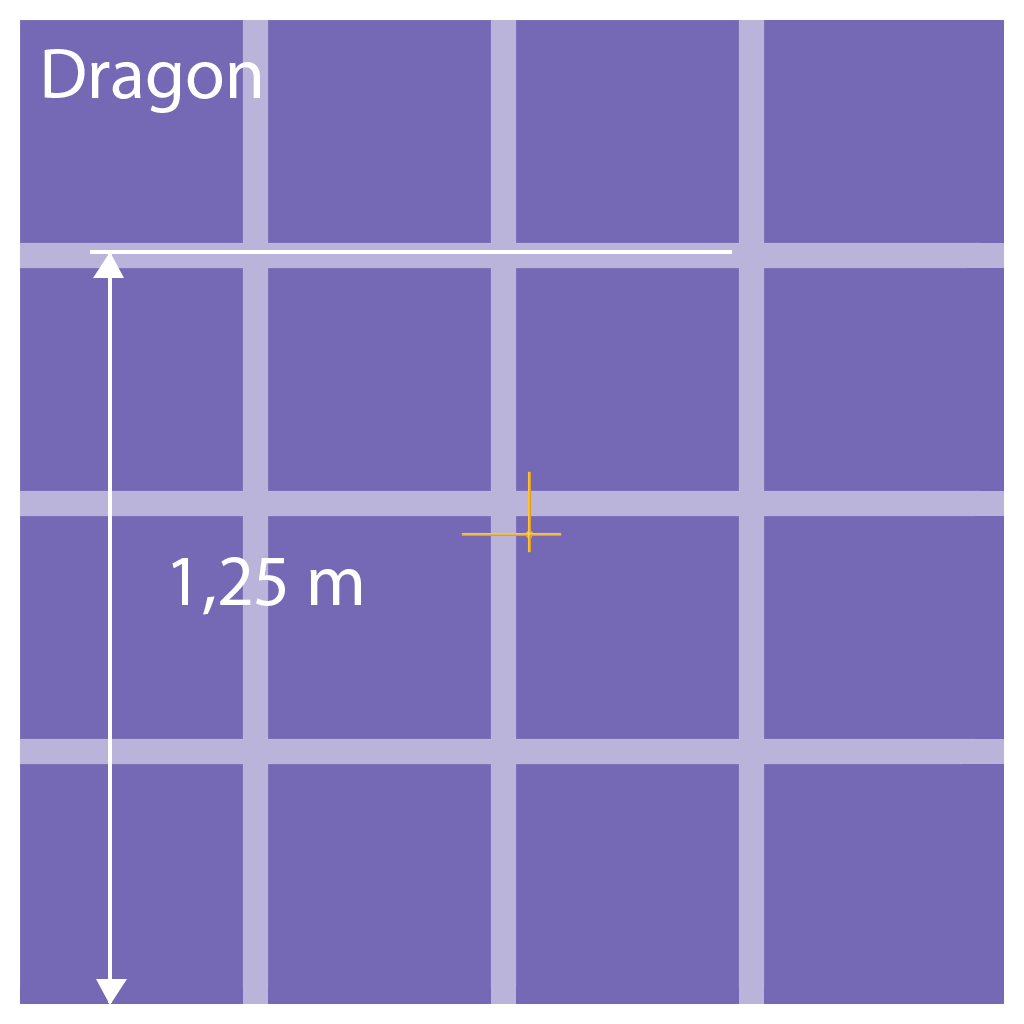
<style>
.page{position:relative;width:1024px;height:1024px;background:#7568b5}
.page>*{position:absolute;margin:0}
.t1{font:72px "MyriadPro-Regular";color:#ffffff}
</style>
<div class="page">
<p class="t1" style="left:44px;top:49px;width:216px;height:64px">Dragon</p>
<p class="t1" style="left:172px;top:557px;width:189px;height:58px">1,25 m</p>
</div>
